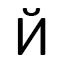
<style>
.page{position:relative;width:64px;height:64px;background:#ffffff}
.page>*{position:absolute;margin:0}
.t1{font:58.3px "Calibri";color:#000000}
</style>
<div class="page">
<p class="t1" style="left:17px;top:8px;width:29px;height:47px">Й</p>
</div>
